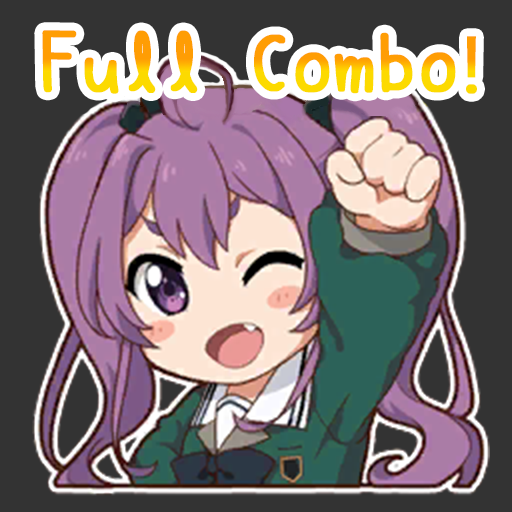
<style>
.page{position:relative;width:512px;height:512px;background:#333333}
.page>*{position:absolute;margin:0}
.t1{font:79.9px "SetoFont";font-weight:bold}
.t2{font:79.9px "YuGothicUI-Regular";font-weight:bold}
</style>
<div class="page">
<p class="t1" style="left:42px;top:30px;width:435px;height:64px">Full Combo<span class="t2">!</span></p>
</div>
